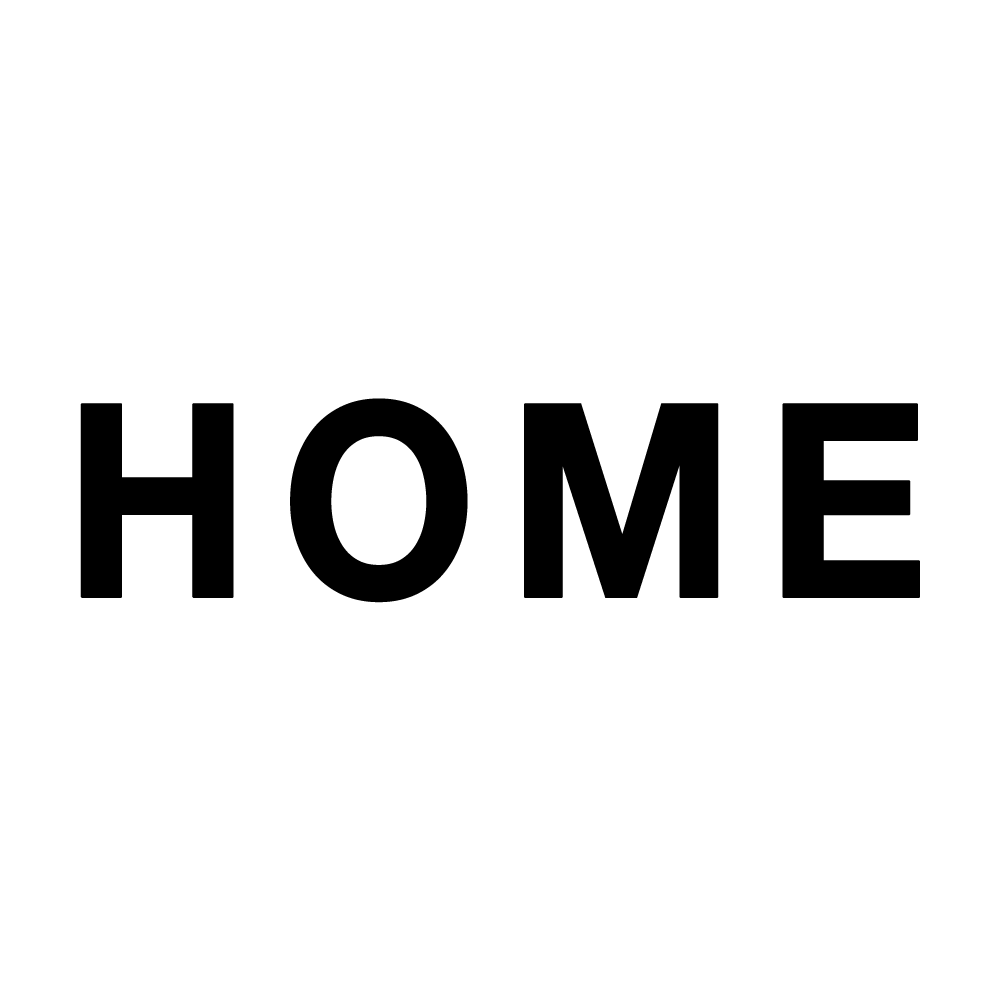
<style>
.page{position:relative;width:1000px;height:1000px;background:#ffffff}
.page>*{position:absolute;margin:0}
.t1{font:270px "HelveticaNeue-Bold";letter-spacing:0.1em;color:#000000;text-transform:uppercase;font-weight:bold;scale:0.93 1}
</style>
<div class="page">
<p class="t1" style="left:80px;top:398px;width:840px;height:205px">HOME</p>
</div>
